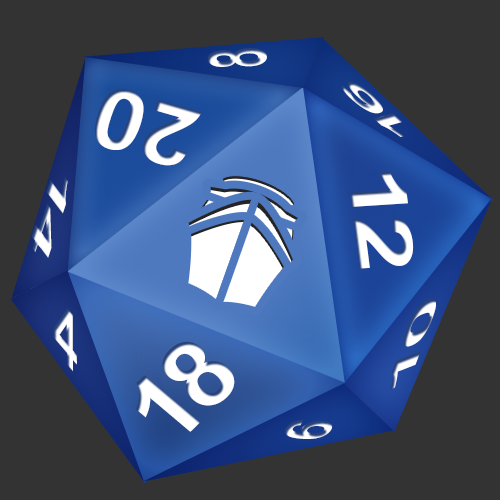
<style>
.page{position:relative;width:500px;height:500px;background:#333333}
.page>*{position:absolute;margin:0}
.t1{font:80.9px "Arial-BoldMT";scale:0.48 1}
.t2{font:85.3px "Arial-BoldMT";color:#ffffff;scale:1.1 1}
.t3{font:27.4px "Arial-BoldMT";letter-spacing:-0.15em;scale:3.43 1}
.t4{font:77.7px "Arial-BoldMT";letter-spacing:-0.075em;color:#ffffff;scale:1.35 1}
.t5{font:37.3px "Arial-BoldMT";letter-spacing:-0.1em;scale:2.45 1}
.t6{font:36.8px "Arial-BoldMT";letter-spacing:-0.1em;scale:2.86 1}
.t7{font:78.9px "Arial-BoldMT";scale:0.88 1}
.t8{font:101.3px "Arial-BoldMT";letter-spacing:-0.075em;color:#ffffff}
.t9{font:60.5px "Arial-BoldMT";scale:0.81 1}
</style>
<div class="page">
<p class="t1" style="left:207px;top:48px;width:60px;height:19px;rotate:-96deg">8</p>
<p class="t2" style="left:95px;top:88px;width:107px;height:78px;rotate:-164deg">20</p>
<p class="t3" style="left:341px;top:82px;width:63px;height:55px;rotate:-138deg">16</p>
<p class="t4" style="left:350px;top:171px;width:64px;height:98px;rotate:83deg">12</p>
<p class="t5" style="left:32px;top:177px;width:36px;height:81px;rotate:108deg">14</p>
<p class="t6" style="left:390px;top:299px;width:46px;height:91px;rotate:-69deg">10</p>
<p class="t7" style="left:53px;top:308px;width:24px;height:64px;rotate:49deg">4</p>
<p class="t8" style="left:136px;top:341px;width:99px;height:91px;rotate:-45deg">18</p>
<p class="t9" style="left:285px;top:420px;width:48px;height:19px;rotate:-52deg">6</p>
</div>
